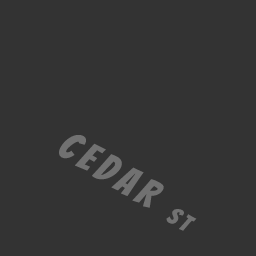
<style>
.page{position:relative;width:256px;height:256px;background:#333333}
.page>*{position:absolute;margin:0}
.t1{font:40px "Bangers-Regular";letter-spacing:0.16em;color:#717171}
.t2{font:24px "Bangers-Regular";letter-spacing:0.16em;color:#717171}
</style>
<div class="page">
<p class="t1" style="left:59px;top:135px;width:138px;height:96px;rotate:31deg">CEDAR <span class="t2">ST</span></p>
</div>
